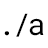
<style>
.page{position:relative;width:48px;height:48px;background:#ffffff}
.page>*{position:absolute;margin:0}
.t1{font:30px "RobotoMono-Regular";letter-spacing:-0.1em;color:#000000}
</style>
<div class="page">
<p class="t1" style="left:4px;top:13px;width:40px;height:24px">./a</p>
</div>
